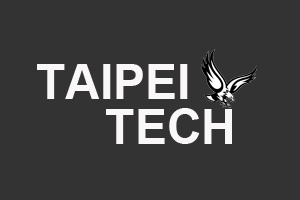
<style>
.page{position:relative;width:300px;height:200px;background:#333333}
.page>*{position:absolute;margin:0}
.t1{font:48px "Arial-BoldMT";color:#faf7f8}
</style>
<div class="page">
<p class="t1" style="left:37px;top:64px;width:151px;height:35px">TAIPEI</p>
<p class="t1" style="left:106px;top:108px;width:126px;height:36px">TECH</p>
</div>
